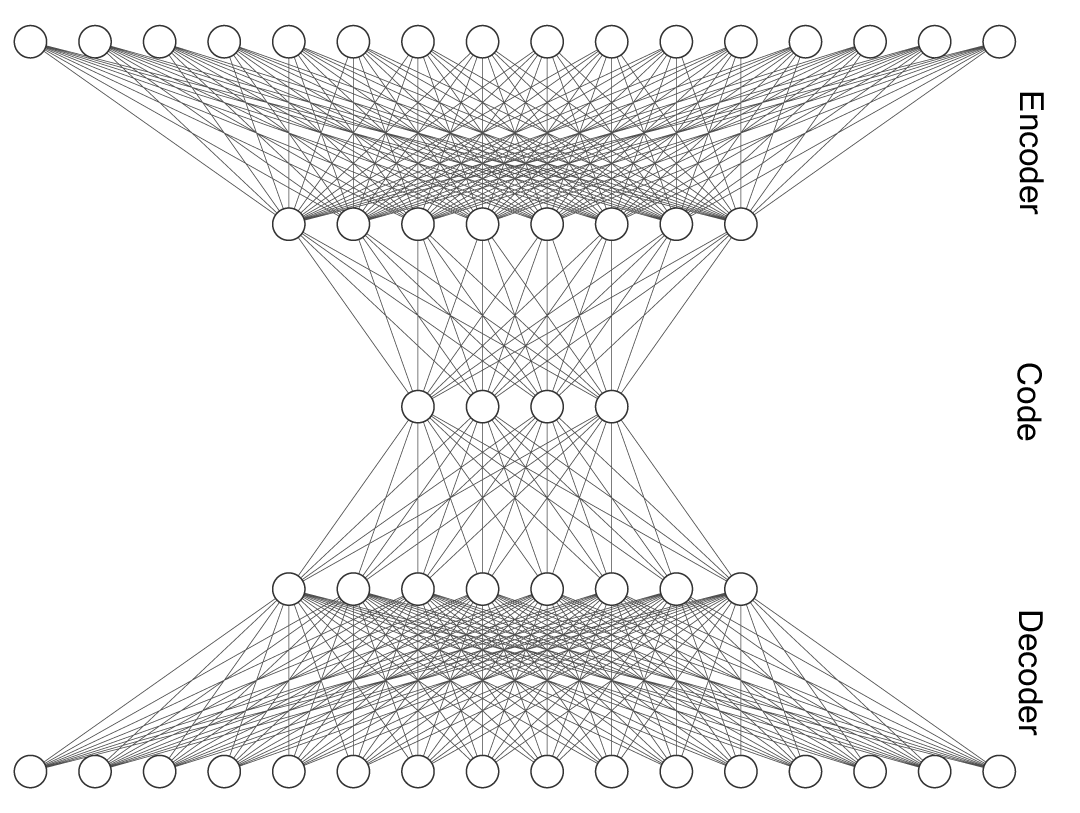
<style>
.page{position:relative;width:1080px;height:813px;background:#ffffff}
.page>*{position:absolute;margin:0}
.t1{font:33.3px "MicrosoftSansSerif";color:#000000}
</style>
<div class="page">
<p class="t1" style="left:1019px;top:92px;width:25px;height:123px;rotate:90deg">Encoder</p>
<p class="t1" style="left:1017px;top:363px;width:25px;height:78px;rotate:90deg">Code</p>
<p class="t1" style="left:1018px;top:611px;width:25px;height:125px;rotate:90deg">Decoder</p>
</div>
